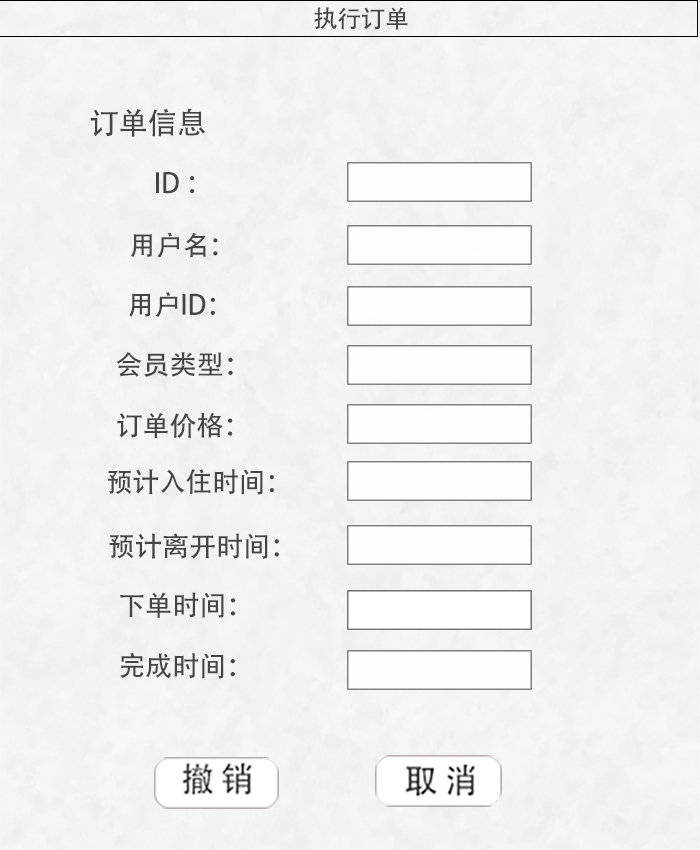
<style>
.page{position:relative;width:700px;height:850px}
.page>*{position:absolute;margin:0}
.t1{font:24px "AdobeHeitiStd-Regular";letter-spacing:-0.005em;color:#474444;text-transform:uppercase}
.t2{font:29.7px "AdobeHeitiStd-Regular";letter-spacing:-0.005em;color:#474444;text-transform:uppercase}
.t3{font:27px "AdobeHeitiStd-Regular";letter-spacing:-0.005em;color:#474444;text-transform:uppercase}
</style>
<div class="page">
<p class="t1" style="left:314px;top:7px;width:94px;height:23px">执行订单</p>
<p class="t2" style="left:90px;top:108px;width:115px;height:29px">订单信息</p>
<p class="t3" style="left:156px;top:172px;width:39px;height:22px">ID ：</p>
<p class="t3" style="left:131px;top:232px;width:87px;height:26px">用户名：</p>
<p class="t3" style="left:129px;top:292px;width:86px;height:25px">用户ID：</p>
<p class="t3" style="left:116px;top:352px;width:117px;height:25px">会员类型：</p>
<p class="t3" style="left:117px;top:412px;width:116px;height:26px">订单价格：</p>
<p class="t3" style="left:108px;top:469px;width:166px;height:26px">预计入住时间：</p>
<p class="t3" style="left:109px;top:533px;width:170px;height:26px">预计离开时间：</p>
<p class="t3" style="left:120px;top:592px;width:116px;height:26px">下单时间：</p>
<p class="t3" style="left:120px;top:653px;width:115px;height:26px">完成时间：</p>
</div>
